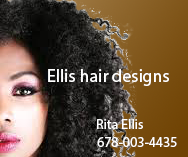
<style>
.page{position:relative;width:188px;height:157px}
.page>*{position:absolute;margin:0}
.t1{font:18px "MyriadPro-Regular";color:#ffffff}
.t2{font:14px "MyriadPro-Regular";color:#ffffff}
</style>
<div class="page">
<p class="t1" style="left:48px;top:69px;width:121px;height:17px">Ellis hair designs</p>
<p class="t2" style="left:97px;top:119px;width:46px;height:10px">Rita Ellis</p>
<p class="t2" style="left:97px;top:137px;width:80px;height:10px">678-003-4435</p>
</div>
